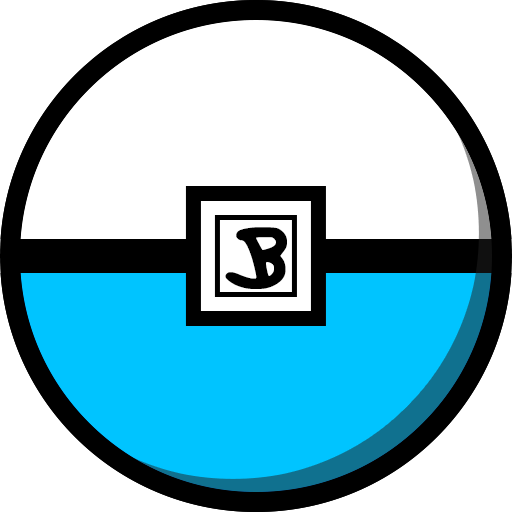
<style>
.page{position:relative;width:512px;height:512px;background:#ffffff}
.page>*{position:absolute;margin:0}
.t1{font:124.5px "BrutalBounce";color:#000000}
</style>
<div class="page">
<p class="t1" style="left:225px;top:227px;width:62px;height:62px">B</p>
</div>
